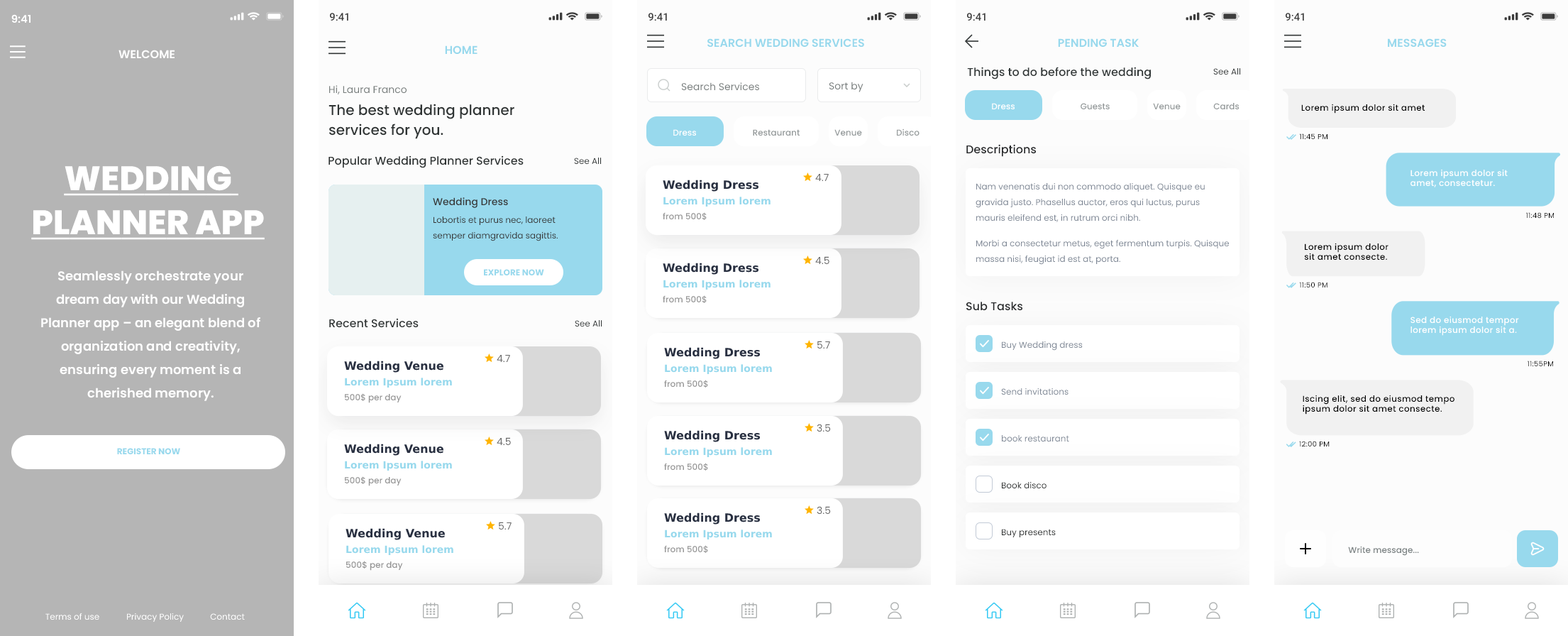
<style>
.page{position:relative;width:1568px;height:636px;background:#ffffff}
.page>*{position:absolute;margin:0}
.t1{font:10.6px "Poppins-SemiBold";color:#ffffff}
.t2{font:10.6px "SFProText-Semibold";color:#3c3c3c}
.t3{font:11.4px "Poppins-SemiBold";color:#98d9ed;text-transform:uppercase}
.t4{font:11.4px "Poppins-SemiBold";color:#ffffff;text-transform:uppercase}
.t5{font:11.4px "Poppins-Medium";color:#313737}
.t6{font:8.5px "Poppins-Regular";color:#303535}
.t7{font:9.9px "Poppins-Regular";color:#787e7d}
.t8{font:14.2px/19.9px "Poppins-Medium";color:#303535}
.t9{font:8.5px "Poppins-Medium";color:#ffffff}
.t10{font:8.5px "Poppins-Medium";color:#94999a}
.t11{font:8.5px "Poppins-Medium";letter-spacing:0.03em;color:#000000}
.t12{font:7.1px "Poppins-Regular";letter-spacing:0.03em;color:#000000}
.t13{font:11.4px "Poppins-Medium";color:#252729}
.t14{font:11.4px "Poppins-Medium";color:#303535}
.t15{font:34.1px/44px "Poppins-ExtraBold";color:#ffffff;text-transform:uppercase;text-decoration:underline}
.t16{font:9.9px "Poppins-Regular";color:#686868}
.t17{font:8.5px "Poppins-Medium";letter-spacing:0.03em;color:#ffffff}
.t18{font:11.4px "Lato-SemiBold";color:#293041}
.t19{font:8.5px/15.6px "Poppins-Regular";color:#7f8896}
.t20{font:9.9px "Poppins-Medium";color:#383838}
.t21{font:9.9px "Lato-SemiBold";color:#98d9ed}
.t22{font:8.5px/15.6px "Poppins-Regular";color:#383838}
.t23{font:8.5px "Poppins-Medium";color:#969696}
.t24{font:8.5px "Poppins-Bold";color:#98d9ed;text-transform:uppercase}
.t25{font:12.8px/23.4px "Poppins-SemiBold";color:#ffffff}
.t26{font:8.5px "Poppins-Regular";color:#7f8896}
.t27{font:8.5px "Poppins-Regular";color:#292c2c}
.t28{font:8.5px "Poppins-Medium";color:#7b8283}
.t29{font:8.5px "Poppins-Regular";color:#ffffff}
</style>
<div class="page">
<p class="t1" style="left:11px;top:14px;width:20px;height:9px">9:41</p>
<p class="t2" style="left:329px;top:13px;width:19px;height:8px">9:41</p>
<p class="t2" style="left:648px;top:13px;width:19px;height:8px">9:41</p>
<p class="t2" style="left:966px;top:13px;width:19px;height:8px">9:41</p>
<p class="t2" style="left:1285px;top:13px;width:19px;height:8px">9:41</p>
<p class="t3" style="left:707px;top:38px;width:157px;height:10px">Search wedding Services</p>
<p class="t3" style="left:1058px;top:38px;width:81px;height:10px">Pending Task</p>
<p class="t3" style="left:1387px;top:38px;width:60px;height:10px">Messages</p>
<p class="t4" style="left:118px;top:50px;width:57px;height:9px">Welcome</p>
<p class="t3" style="left:445px;top:45px;width:32px;height:10px">Home</p>
<p class="t5" style="left:967px;top:67px;width:184px;height:12px">Things to do before the wedding</p>
<p class="t6" style="left:1213px;top:68px;width:28px;height:7px">See All</p>
<p class="t7" style="left:329px;top:85px;width:78px;height:10px">Hi, Laura Franco</p>
<p class="t7" style="left:681px;top:82px;width:78px;height:9px">Search Services</p>
<p class="t7" style="left:829px;top:82px;width:34px;height:10px">Sort by</p>
<p class="t8" style="left:328px;top:104px;width:186px;height:35px">The best wedding planner services for you.</p>
<p class="t9" style="left:992px;top:103px;width:23px;height:7px">Dress</p>
<p class="t10" style="left:1081px;top:103px;width:29px;height:7px">Guests</p>
<p class="t10" style="left:1153px;top:103px;width:28px;height:7px">Venue</p>
<p class="t10" style="left:1213px;top:103px;width:27px;height:7px">Cards</p>
<p class="t11" style="left:1301px;top:104px;width:124px;height:10px">Lorem ipsum dolor sit amet</p>
<p class="t9" style="left:673px;top:129px;width:24px;height:7px">Dress</p>
<p class="t10" style="left:753px;top:129px;width:47px;height:7px">Restaurant</p>
<p class="t10" style="left:834px;top:129px;width:28px;height:7px">Venue</p>
<p class="t10" style="left:896px;top:128px;width:24px;height:8px">Disco</p>
<p class="t12" style="left:1299px;top:133px;width:28px;height:7px">11:45 PM</p>
<p class="t13" style="left:966px;top:144px;width:71px;height:13px">Descriptions</p>
<p class="t14" style="left:328px;top:155px;width:196px;height:13px">Popular Wedding Planner Services</p>
<p class="t6" style="left:574px;top:158px;width:28px;height:7px">See All</p>
<p class="t15" style="left:31px;top:165px;width:234px;height:75px;text-align:center">Wedding Planner App</p>
<p class="t16" style="left:815px;top:173px;width:14px;height:9px">4.7</p>
<p class="t17" style="left:1410px;top:169px;width:98px;height:18px">Lorem ipsum dolor sit amet, consectetur.</p>
<p class="t18" style="left:663px;top:180px;width:96px;height:12px">Wedding Dress</p>
<p class="t19" style="left:976px;top:182px;width:229px;height:40px">Nam venenatis dui non commodo aliquet. Quisque eu gravida justo. Phasellus auctor, eros qui luctus, purus mauris eleifend est, in rutrum orci nibh.</p>
<p class="t20" style="left:433px;top:197px;width:75px;height:11px">Wedding Dress</p>
<p class="t21" style="left:663px;top:197px;width:108px;height:9px">Lorem Ipsum lorem</p>
<p class="t22" style="left:433px;top:216px;width:125px;height:25px">Lobortis et purus nec, laoreet semper diamgravida sagittis.</p>
<p class="t23" style="left:663px;top:212px;width:44px;height:9px">from 500$</p>
<p class="t12" style="left:1525px;top:212px;width:30px;height:7px">11:48 PM</p>
<p class="t19" style="left:976px;top:239px;width:254px;height:26px">Morbi a consectetur metus, eget fermentum turpis. Quisque massa nisi, feugiat id est at, porta.</p>
<p class="t11" style="left:1304px;top:243px;width:84px;height:17px">Lorem ipsum dolor sit amet consecte.</p>
<p class="t16" style="left:815px;top:256px;width:14px;height:9px">4.5</p>
<p class="t24" style="left:483px;top:269px;width:61px;height:7px">Explore Now</p>
<p class="t18" style="left:663px;top:263px;width:96px;height:12px">Wedding Dress</p>
<p class="t25" style="left:41px;top:270px;width:219px;height:131px;text-align:center">Seamlessly orchestrate your dream day with our Wedding Planner app – an elegant blend of organization and creativity, ensuring every moment is a cherished memory.</p>
<p class="t21" style="left:663px;top:280px;width:108px;height:9px">Lorem Ipsum lorem</p>
<p class="t12" style="left:1299px;top:282px;width:28px;height:6px">11:50 PM</p>
<p class="t23" style="left:663px;top:295px;width:44px;height:9px">from 500$</p>
<p class="t13" style="left:966px;top:302px;width:57px;height:9px">Sub Tasks</p>
<p class="t14" style="left:329px;top:318px;width:90px;height:10px">Recent Services</p>
<p class="t17" style="left:1410px;top:316px;width:109px;height:20px">Sed do eiusmod tempor lorem ipsum dolor sit a.</p>
<p class="t6" style="left:575px;top:320px;width:27px;height:7px">See All</p>
<p class="t16" style="left:817px;top:341px;width:13px;height:8px">5.7</p>
<p class="t26" style="left:1001px;top:341px;width:82px;height:9px">Buy Wedding dress</p>
<p class="t18" style="left:664px;top:347px;width:97px;height:12px">Wedding Dress</p>
<p class="t18" style="left:344px;top:360px;width:99px;height:12px">Wedding Venue</p>
<p class="t16" style="left:497px;top:354px;width:13px;height:9px">4.7</p>
<p class="t21" style="left:665px;top:364px;width:107px;height:10px">Lorem Ipsum lorem</p>
<p class="t12" style="left:1527px;top:360px;width:27px;height:7px">11:55PM</p>
<p class="t21" style="left:345px;top:377px;width:107px;height:10px">Lorem Ipsum lorem</p>
<p class="t23" style="left:664px;top:380px;width:44px;height:8px">from 500$</p>
<p class="t26" style="left:1001px;top:387px;width:68px;height:8px">Send invitations</p>
<p class="t23" style="left:344px;top:393px;width:58px;height:10px">500$ per day</p>
<p class="t11" style="left:1303px;top:394px;width:151px;height:20px">Iscing elit, sed do eiusmod tempo  ipsum dolor sit amet consecte.</p>
<p class="t16" style="left:817px;top:424px;width:14px;height:8px">3.5</p>
<p class="t16" style="left:497px;top:437px;width:14px;height:9px">4.5</p>
<p class="t18" style="left:664px;top:430px;width:97px;height:12px">Wedding Dress</p>
<p class="t26" style="left:1001px;top:435px;width:68px;height:7px">book restaurant</p>
<p class="t24" style="left:117px;top:448px;width:63px;height:7px">register now</p>
<p class="t18" style="left:344px;top:443px;width:99px;height:13px">Wedding Venue</p>
<p class="t21" style="left:665px;top:447px;width:107px;height:10px">Lorem Ipsum lorem</p>
<p class="t12" style="left:1299px;top:441px;width:31px;height:6px">12:00 PM</p>
<p class="t21" style="left:345px;top:460px;width:107px;height:10px">Lorem Ipsum lorem</p>
<p class="t23" style="left:664px;top:463px;width:44px;height:8px">from 500$</p>
<p class="t23" style="left:344px;top:476px;width:58px;height:10px">500$ per day</p>
<p class="t27" style="left:1001px;top:481px;width:46px;height:8px">Book disco</p>
<p class="t16" style="left:817px;top:506px;width:14px;height:8px">3.5</p>
<p class="t16" style="left:499px;top:521px;width:13px;height:9px">5.7</p>
<p class="t18" style="left:664px;top:512px;width:97px;height:12px">Wedding Dress</p>
<p class="t18" style="left:346px;top:528px;width:99px;height:12px">Wedding Venue</p>
<p class="t21" style="left:665px;top:529px;width:107px;height:10px">Lorem Ipsum lorem</p>
<p class="t27" style="left:1001px;top:529px;width:55px;height:9px">Buy presents</p>
<p class="t21" style="left:346px;top:545px;width:107px;height:10px">Lorem Ipsum lorem</p>
<p class="t23" style="left:664px;top:545px;width:44px;height:8px">from 500$</p>
<p class="t28" style="left:1348px;top:546px;width:71px;height:10px">Write message...</p>
<p class="t23" style="left:346px;top:561px;width:57px;height:9px">500$ per day</p>
<p class="t29" style="left:45px;top:612px;width:54px;height:8px">Terms of use</p>
<p class="t29" style="left:126px;top:612px;width:58px;height:10px">Privacy Policy</p>
<p class="t29" style="left:210px;top:613px;width:35px;height:7px">Contact</p>
</div>
